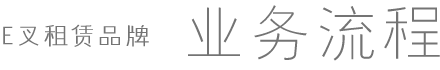
<style>
.page{position:relative;width:440px;height:70px;background:#ffffff}
.page>*{position:absolute;margin:0}
.t1{font:60px "FZYXJW--GB1-0";letter-spacing:0.1em;color:#747474}
.t2{font:24px "FZYXJW--GB1-0";letter-spacing:0.1em;color:#747474;font-weight:bold}
</style>
<div class="page">
<p class="t1" style="left:188px;top:5px;width:252px;height:56px">业务流程</p>
<p class="t2" style="left:3px;top:24px;width:146px;height:23px">E叉租赁品牌</p>
</div>
